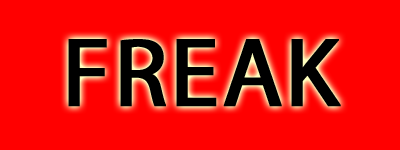
<style>
.page{position:relative;width:400px;height:150px;background:#ff0000}
.page>*{position:absolute;margin:0}
.t1{font:98px "MyriadPro-Regular";letter-spacing:0.01em;color:#000000;font-weight:bold}
</style>
<div class="page">
<p class="t1" style="left:68px;top:39px;width:273px;height:68px">FREAK</p>
</div>
